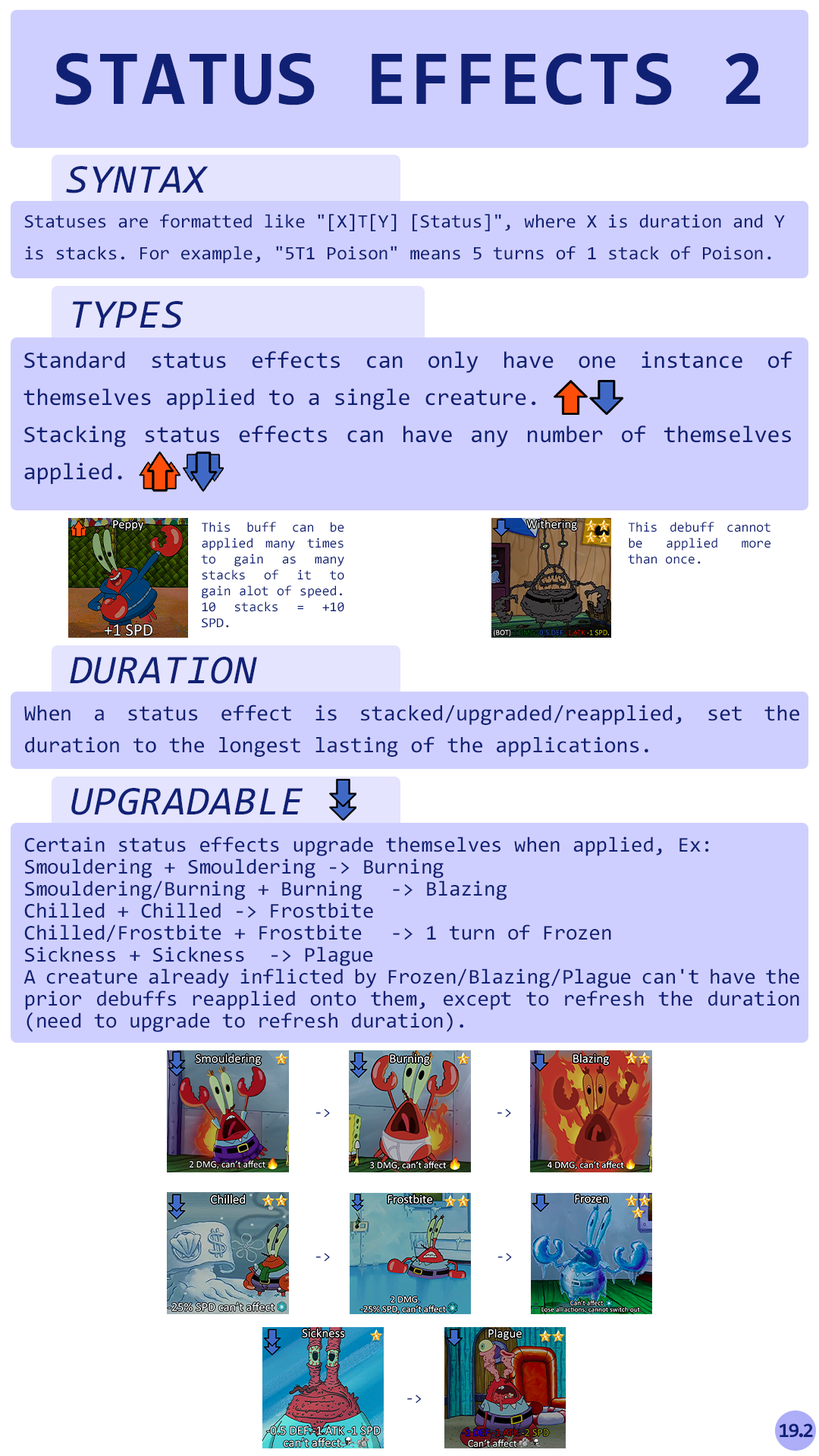
<style>
.page{position:relative;width:819px;height:1456px;background:#cfcfff}
.page>*{position:absolute;margin:0}
.t1{font:78.3px "Consolas-Bold";letter-spacing:0.02em;color:#102175}
.t2{font:41.1px "Consolas-Italic";letter-spacing:0.02em;color:#102175}
.t3{font:19px/31.8px "Consolas";color:#102175}
.t4{font:23.5px/37.2px "Consolas";color:#102175}
.t5{font:13.6px/16px "Consolas";color:#102175}
.t6{font:22px/31.8px "Consolas";color:#102175}
.t7{font:21.2px/22px "Consolas";color:#102175}
.t8{font:15.2px "Consolas";color:#102175}
.t9{font:20.5px "Consolas-Bold";letter-spacing:-0.06em;color:#102175}
.t10{font:20.5px "Consolas-Bold";letter-spacing:-0.2em;color:#102175}
.t11{font:20.5px "Consolas-Bold";letter-spacing:-0.22em;color:#102175}
</style>
<div class="page">
<p class="t1" style="left:55px;top:53px;width:706px;height:52px">STATUS EFFECTS 2</p>
<p class="t2" style="left:66px;top:166px;width:143px;height:27px">SYNTAX</p>
<p class="t3" style="left:24px;top:214px;width:761px;height:49px">Statuses are formatted like "[X]T[Y] [Status]", where X is duration and Y is stacks. For example, "5T1 Poison" means 5 turns of 1 stack of Poison.</p>
<p class="t2" style="left:72px;top:301px;width:112px;height:27px">TYPES</p>
<p class="t4" style="left:24px;top:351px;width:768px;height:134px;text-align:justify">Standard status effects can only have one instance of themselves applied to a single creature.<br>Stacking status effects can have any number of themselves applied.</p>
<p class="t5" style="left:201px;top:522px;width:143px;height:106px;text-align:justify">This buff can be applied many times to gain as many stacks of it to gain alot of speed. 10 stacks = +10 SPD.</p>
<p class="t5" style="left:628px;top:522px;width:142px;height:42px;text-align:justify">This debuff cannot be applied more than once.</p>
<p class="t2" style="left:70px;top:657px;width:187px;height:27px">DURATION</p>
<p class="t6" style="left:24px;top:704px;width:775px;height:53px;text-align:justify">When a status effect is stacked/upgraded/reapplied, set the duration to the longest lasting of the applications.</p>
<p class="t2" style="left:71px;top:788px;width:232px;height:27px">UPGRADABLE</p>
<p class="t7" style="left:24px;top:836px;width:775px;height:196px;text-align:justify">Certain status effects upgrade themselves when applied, Ex:<br>Smouldering + Smouldering -&gt; Burning<br>Smouldering/Burning + Burning -&gt; Blazing<br>Chilled + Chilled -&gt; Frostbite<br>Chilled/Frostbite + Frostbite -&gt; 1 turn of Frozen<br>Sickness + Sickness  -&gt; Plague<br>A creature already inflicted by Frozen/Blazing/Plague can't have the prior debuffs reapplied onto them, except to refresh the duration (need to upgrade to refresh duration).</p>
<p class="t8" style="left:316px;top:1109px;width:14px;height:9px">-&gt;</p>
<p class="t8" style="left:497px;top:1109px;width:14px;height:9px">-&gt;</p>
<p class="t8" style="left:316px;top:1253px;width:14px;height:9px">-&gt;</p>
<p class="t8" style="left:497px;top:1253px;width:15px;height:9px">-&gt;</p>
<p class="t8" style="left:407px;top:1395px;width:15px;height:9px">-&gt;</p>
<p class="t9" style="left:779px;top:1423px;width:34px;height:15px">1<span class="t10">9</span><span class="t11">.</span>2</p>
</div>
